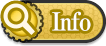
<style>
.page{position:relative;width:106px;height:46px}
.page>*{position:absolute;margin:0}
.t1{font:25px "RyuminPro-ExBold";letter-spacing:-0.08em;color:#ffffff;scale:0.9 1}
</style>
<div class="page">
<p class="t1" style="left:52px;top:11px;width:39px;height:20px">Info</p>
</div>
